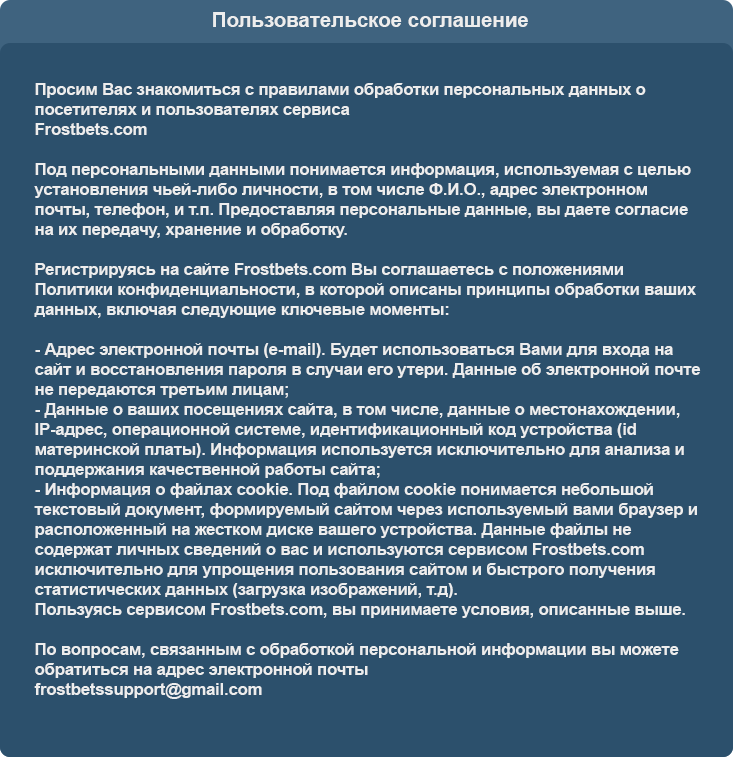
<style>
.page{position:relative;width:733px;height:757px;background:#2c506c}
.page>*{position:absolute;margin:0}
.t1{font:20.8px "Arial-BoldMT";letter-spacing:-0.01em;color:#ededed}
.t2{font:16.7px "Arial-BoldMT";letter-spacing:-0.01em;color:#ededed}
</style>
<div class="page">
<p class="t1" style="left:213px;top:12px;width:315px;height:15px">Пользовательское соглашение</p>
<p class="t2" style="left:34px;top:83px;width:667px;height:616px">Просим Вас знакомиться с правилами обработки персональных данных о посетителях и пользователях сервиса<br>Frostbets.com<br><br>Под персональными данными понимается информация, используемая с целью установления чьей-либо личности, в том числе Ф.И.О., адрес электронном почты, телефон, и т.п. Предоставляя персональные данные, вы даете согласие на их передачу, хранение и обработку. <br><br>Регистрируясь на сайте Frostbets.com Вы соглашаетесь с положениями Политики конфиденциальности, в которой описаны принципы обработки ваших данных, включая следующие ключевые моменты:<br><br>- Адрес электронной почты (e-mail). Будет использоваться Вами для входа на сайт и восстановления пароля в случаи его утери. Данные об электронной почте не передаются третьим лицам;<br>- Данные о ваших посещениях сайта, в том числе, данные о местонахождении, IP-адрес, операционной системе, идентификационный код устройства (id материнской платы). Информация используется исключительно для анализа и поддержания качественной работы сайта;<br>- Информация о файлах cookie. Под файлом cookie понимается небольшой текстовый документ, формируемый сайтом через используемый вами браузер и расположенный на жестком диске вашего устройства. Данные файлы не содержат личных сведений о вас и используются сервисом Frostbets.com исключительно для упрощения пользования сайтом и быстрого получения статистических данных (загрузка изображений, т.д).<br>Пользуясь сервисом Frostbets.com, вы принимаете условия, описанные выше. <br><br>По вопросам, связанным с обработкой персональной информации вы можете обратиться на адрес электронной почты<br>frostbetssupport@gmail.com</p>
</div>
